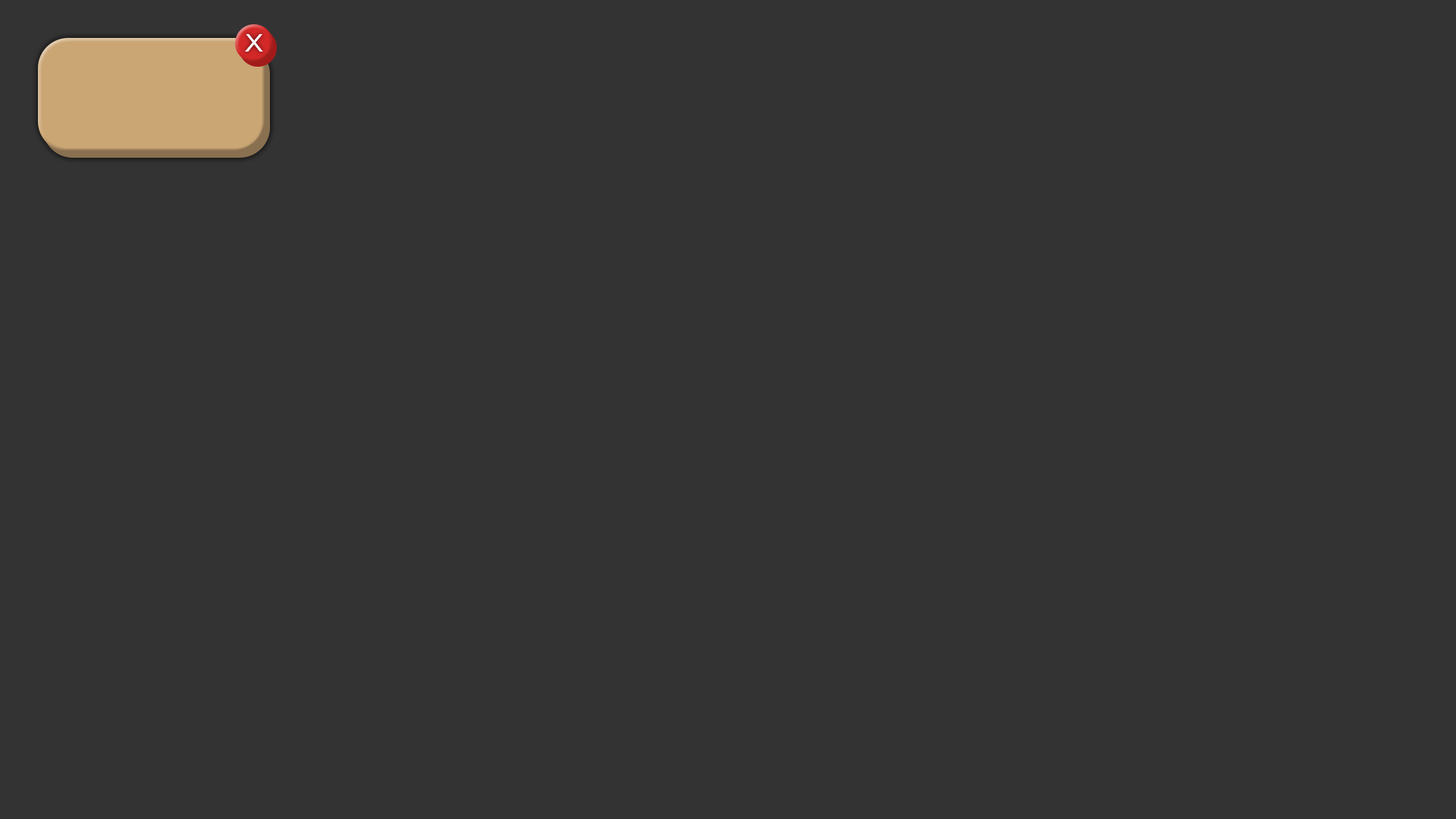
<style>
.page{position:relative;width:1456px;height:819px;background:#333333}
.page>*{position:absolute;margin:0}
.t1{font:24.6px "ArialMT";color:#ffffff;scale:1.12 1}
</style>
<div class="page">
<p class="t1" style="left:245px;top:34px;width:18px;height:18px">X</p>
</div>
